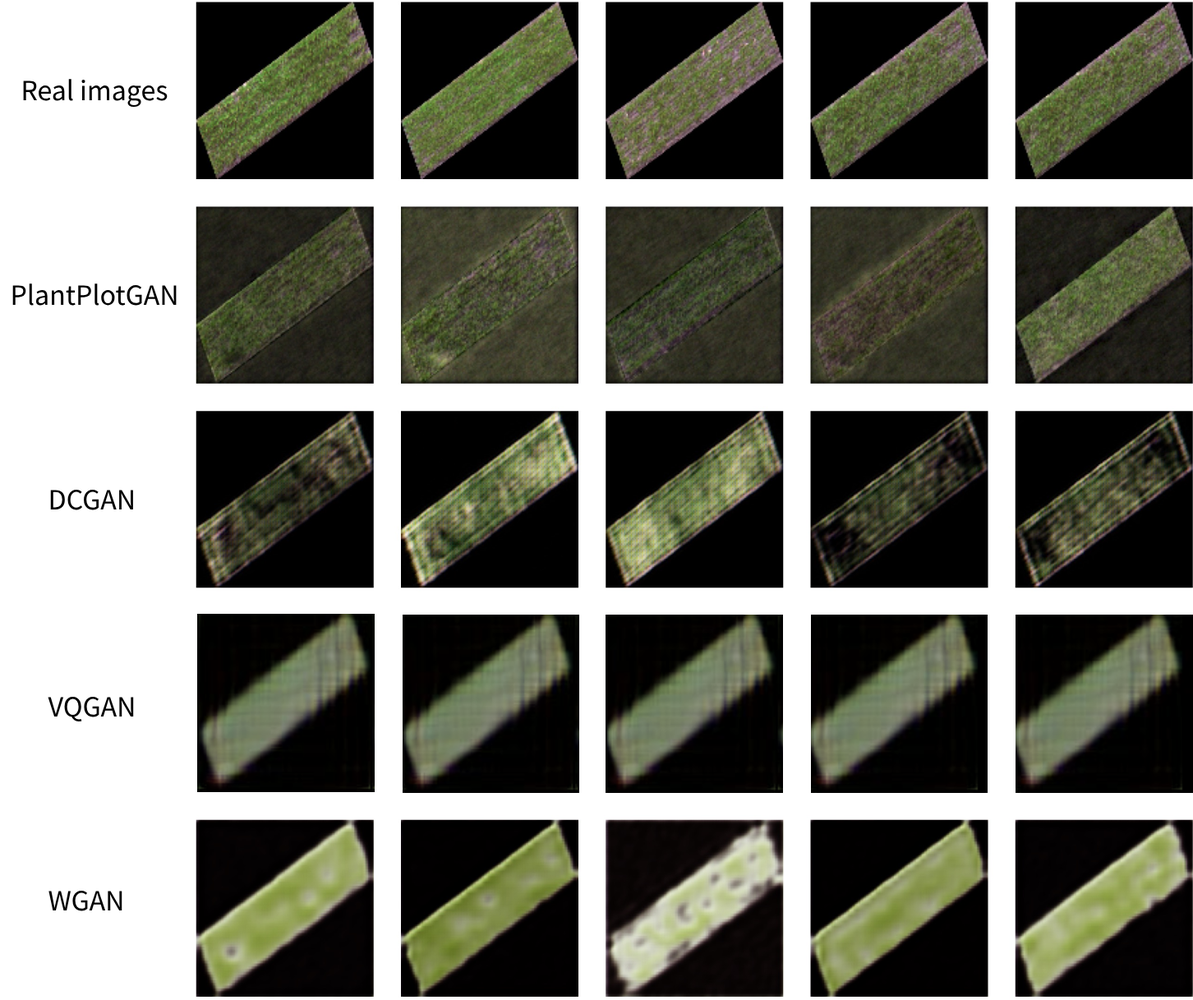
<style>
.page{position:relative;width:1193px;height:1000px;background:#ffffff}
.page>*{position:absolute;margin:0}
.t1{font:29.6px "Calibri";color:#000000}
.t2{font:29.6px "Calibri";letter-spacing:-0.002em;color:#000000}
.t3{font:29.6px "Calibri";letter-spacing:-0.001em;color:#000000}
</style>
<div class="page">
<p class="t1" style="left:23px;top:79px;width:145px;height:29px"><span class="t2">Real </span>images</p>
<p class="t1" style="left:12px;top:283px;width:165px;height:23px">PlantPlotGAN</p>
<p class="t1" style="left:50px;top:489px;width:83px;height:21px">DCGAN</p>
<p class="t3" style="left:48px;top:696px;width:86px;height:25px">VQGAN</p>
<p class="t3" style="left:48px;top:890px;width:74px;height:21px">WGAN</p>
</div>
